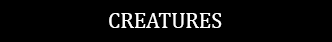
<style>
.page{position:relative;width:332px;height:42px;background:#000000}
.page>*{position:absolute;margin:0}
.t1{font:21.7px "Cambria";color:#ffffff}
</style>
<div class="page">
<p class="t1" style="left:109px;top:13px;width:113px;height:15px">CREATURES</p>
</div>
